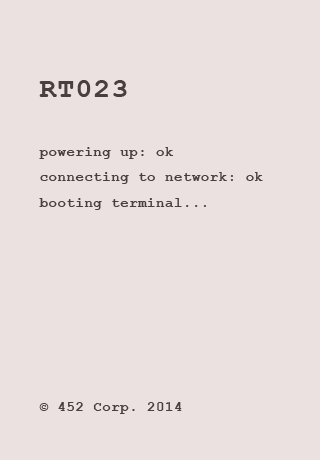
<style>
.page{position:relative;width:320px;height:460px;background:#ebe1e1}
.page>*{position:absolute;margin:0}
.t1{font:24px/25.6px "CourierNewPS-BoldMT";letter-spacing:0.04em;color:#493f3f}
.t2{font:48px/25.6px "CourierNewPS-BoldMT";letter-spacing:0.04em;color:#493f3f}
</style>
<div class="page">
<p class="t1" style="left:39px;top:80px;width:224px;height:334px"><span class="t2">RT023<br><br></span>powering up: ok<br>connecting to network: ok<br>booting terminal...<br><br><br><br><br><br><br><br>© 452 Corp. 2014</p>
</div>
